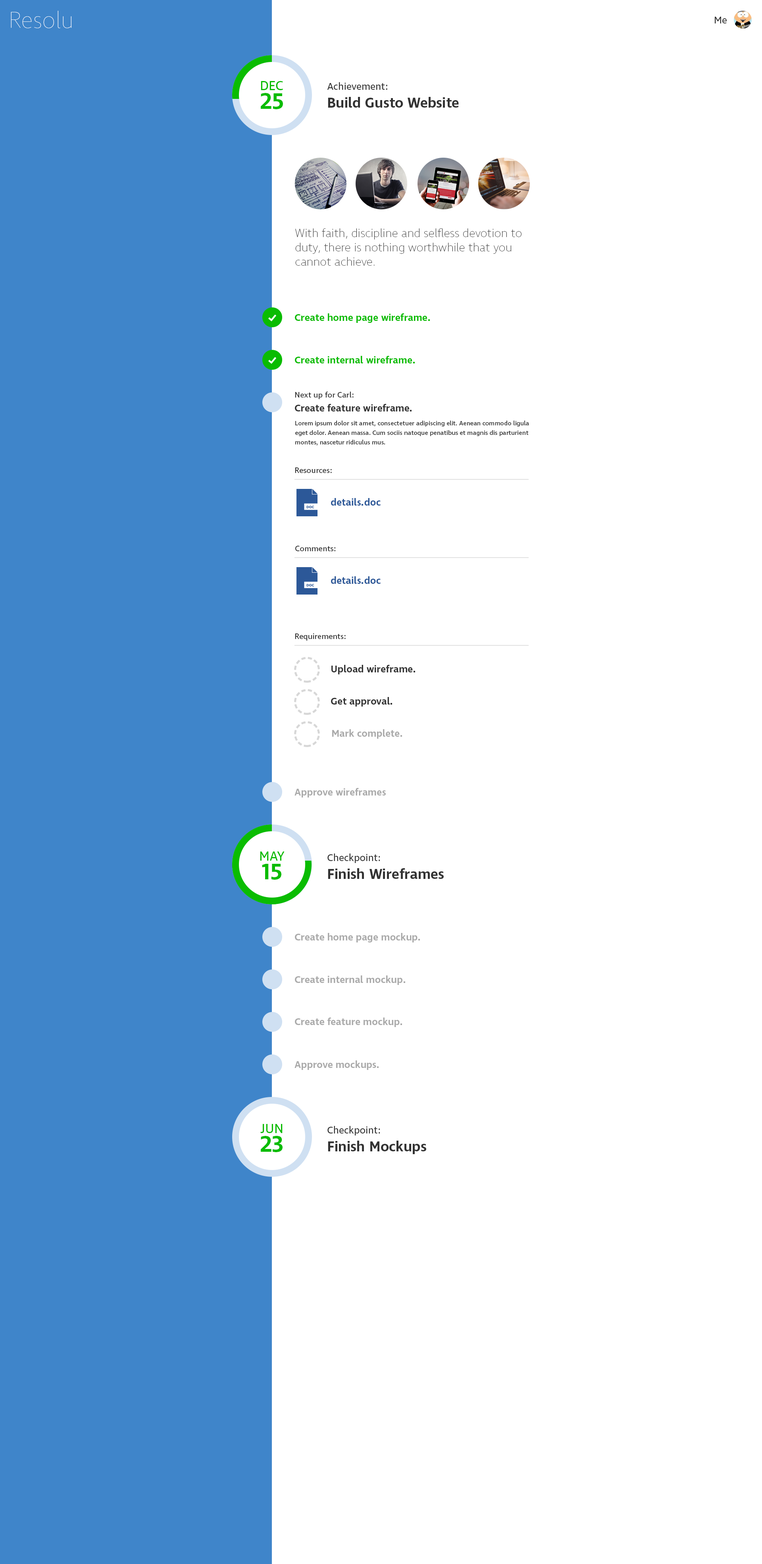
<style>
.page{position:relative;width:762px;height:1564px;background:#ffffff}
.page>*{position:absolute;margin:0}
.t1{font:23.4px "Ingra-Hair";color:#fffefe}
.t2{font:9.9px "Ingra-Book";color:#333333}
.t3{font:13px/18.9px "Ingra-Book";color:#0abc01}
.t4{font:22.7px/18.9px "Ingra-SemiBold";color:#0abc01}
.t5{font:14.3px/17.9px "Ingra-SemiBold";color:#333333}
.t6{font:9.9px/17.9px "Ingra-Book";color:#333333}
.t7{font:11.9px/14.3px "Ingra-Thin";color:#333333}
.t8{font:9.9px "Ingra-SemiBold";color:#0abc01}
.t9{font:9.9px/13.9px "Ingra-SemiBold";color:#333333}
.t10{font:7.9px/13.9px "Ingra-Book";color:#333333}
.t11{font:6.4px/9.5px "Ingra-Book";color:#333333}
.t12{font:7.9px "Ingra-Book";color:#333333}
.t13{font:9.9px "Ingra-SemiBold";color:#2c5898}
.t14{font:9.9px "Ingra-SemiBold";color:#333333}
.t15{font:9.9px "Ingra-SemiBold";color:#aaaaaa}
</style>
<div class="page">
<p class="t1" style="left:11px;top:11px;width:60px;height:17px">Resolu</p>
<p class="t2" style="left:715px;top:17px;width:12px;height:6px">Me</p>
<p class="t3" style="left:261px;top:81px;width:22px;height:28px">DEC<br><span class="t4">25</span></p>
<p class="t5" style="left:327px;top:82px;width:132px;height:26px"><span class="t6">Achievement:<br></span>Build Gusto Website</p>
<p class="t7" style="left:295px;top:228px;width:227px;height:38px">With faith, discipline and selfless devotion to duty, there is nothing worthwhile that you cannot achieve.</p>
<p class="t8" style="left:295px;top:313px;width:135px;height:10px">Create home page wireframe.</p>
<p class="t8" style="left:295px;top:356px;width:120px;height:7px">Create internal wireframe.</p>
<p class="t9" style="left:295px;top:392px;width:117px;height:19px"><span class="t10">Next up for Carl:<br></span>Create feature wireframe.</p>
<p class="t11" style="left:295px;top:421px;width:234px;height:25px">Lorem ipsum dolor sit amet, consectetuer adipiscing elit. Aenean commodo ligula eget dolor. Aenean massa. Cum sociis natoque penatibus et magnis dis parturient montes, nascetur ridiculus mus.</p>
<p class="t12" style="left:295px;top:467px;width:37px;height:6px">Resources:</p>
<p class="t13" style="left:331px;top:498px;width:50px;height:8px">details.doc</p>
<p class="t12" style="left:295px;top:546px;width:41px;height:5px">Comments:</p>
<p class="t13" style="left:331px;top:576px;width:50px;height:8px">details.doc</p>
<p class="t12" style="left:295px;top:633px;width:51px;height:8px">Requirements:</p>
<p class="t14" style="left:332px;top:665px;width:83px;height:9px">Upload wireframe.</p>
<p class="t14" style="left:331px;top:697px;width:61px;height:9px">Get approval.</p>
<p class="t15" style="left:332px;top:729px;width:70px;height:10px">Mark complete.</p>
<p class="t15" style="left:295px;top:788px;width:91px;height:9px">Approve wireframes</p>
<p class="t3" style="left:260px;top:851px;width:25px;height:29px;text-align:center">MAY<br><span class="t4">15</span></p>
<p class="t5" style="left:328px;top:853px;width:116px;height:26px"><span class="t6">Checkpoint:<br></span>Finish Wireframes</p>
<p class="t15" style="left:295px;top:933px;width:125px;height:9px">Create home page mockup.</p>
<p class="t15" style="left:295px;top:975px;width:110px;height:10px">Create internal mockup.</p>
<p class="t15" style="left:295px;top:1017px;width:107px;height:10px">Create feature mockup.</p>
<p class="t15" style="left:295px;top:1060px;width:84px;height:10px">Approve mockups.</p>
<p class="t3" style="left:261px;top:1124px;width:22px;height:28px;text-align:center">JUN<br><span class="t4">23</span></p>
<p class="t5" style="left:328px;top:1126px;width:99px;height:28px"><span class="t6">Checkpoint:<br></span>Finish Mockups</p>
</div>
